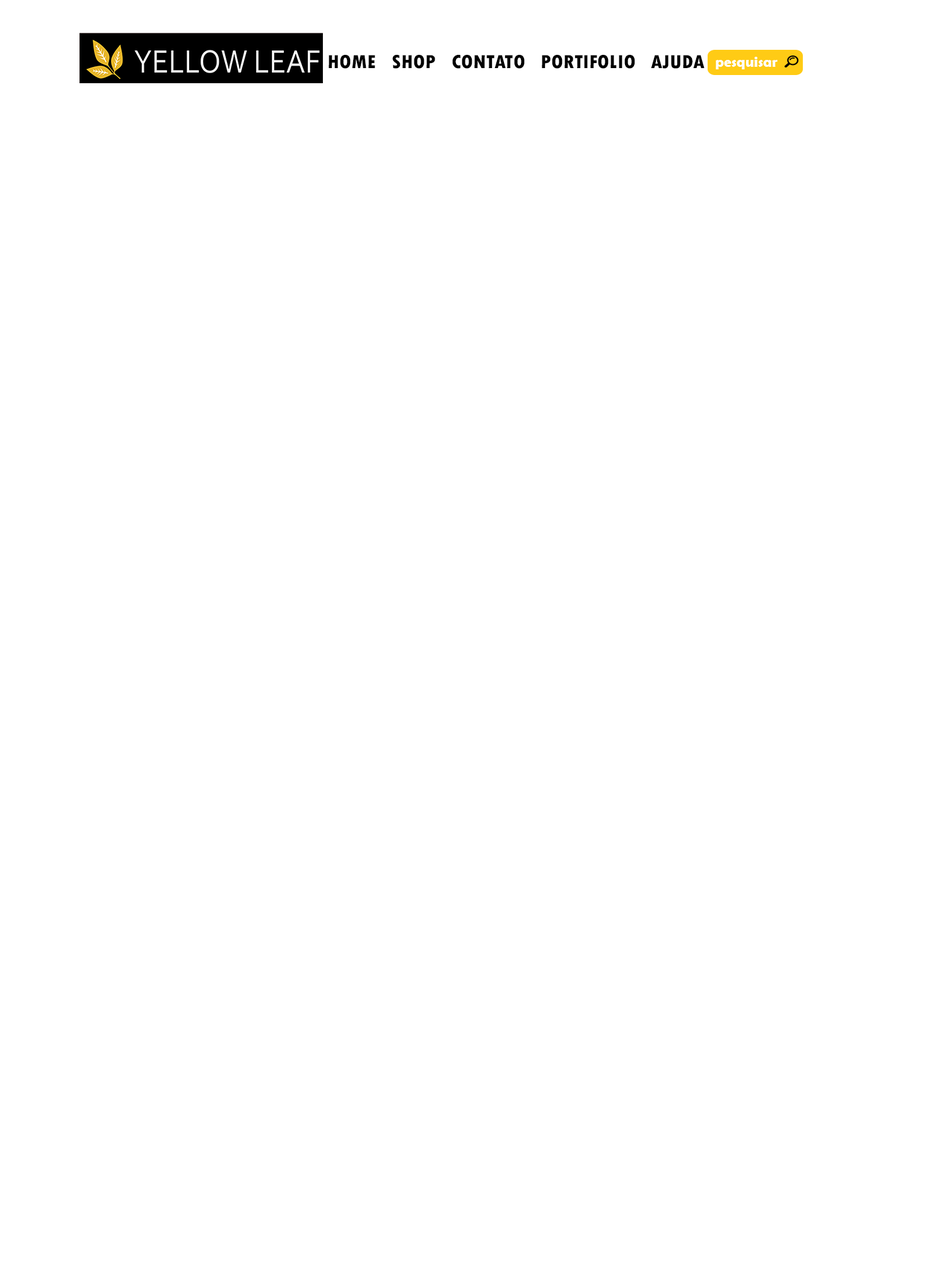
<style>
.page{position:relative;width:946px;height:1261px;background:#ffffff}
.page>*{position:absolute;margin:0}
.t1{font:19.9px "TwCenMT-CondensedExtraBold";color:#000000;scale:1.07 1}
.t2{font:14.5px "BerlinSansFBDemi-Bold";color:#ffffff}
</style>
<div class="page">
<p class="t1" style="left:328px;top:55px;width:376px;height:14px">HOME   SHOP   CONTATO   PORTIFOLIO   AJUDA</p>
<p class="t2" style="left:716px;top:57px;width:61px;height:12px">pesquisar</p>
</div>
